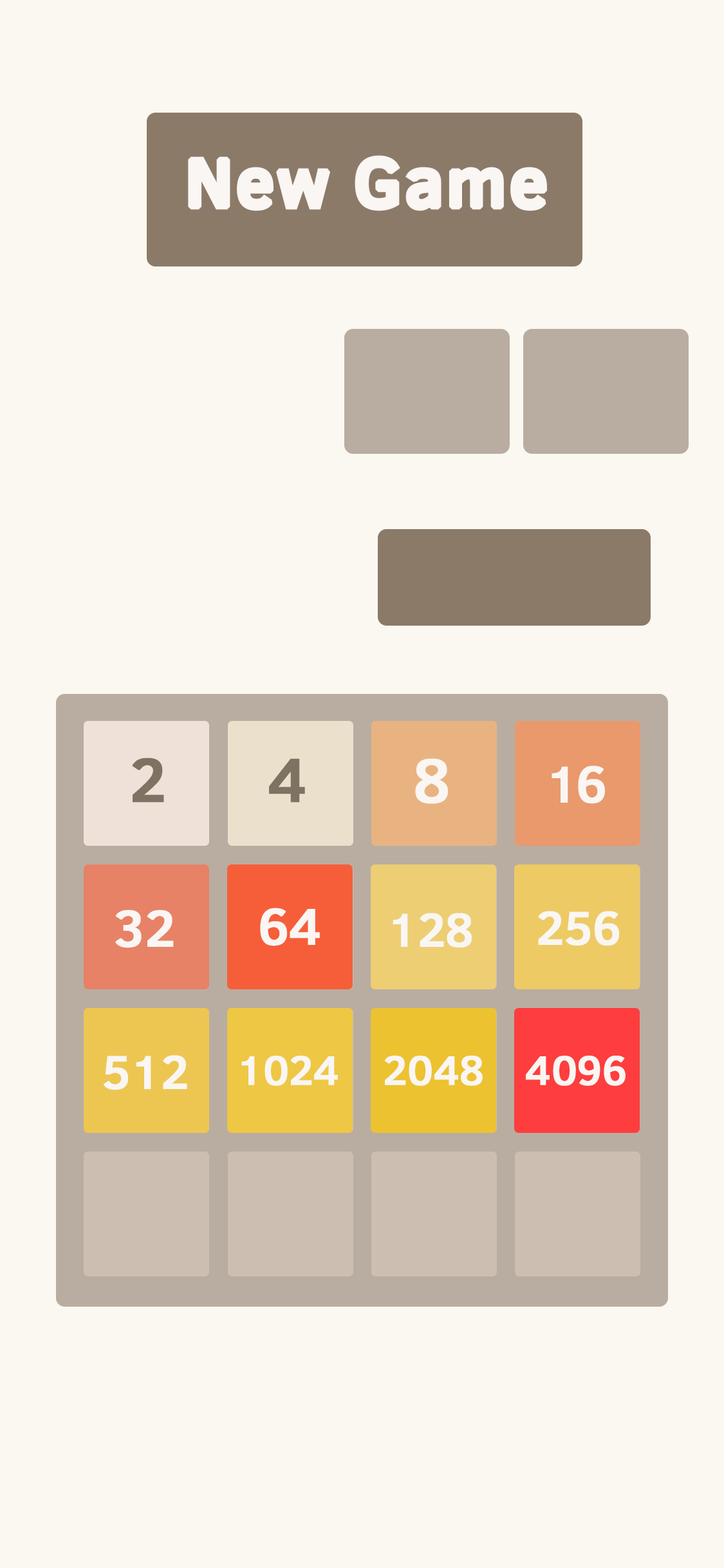
<style>
.page{position:relative;width:724px;height:1568px;background:#faf8f0}
.page>*{position:absolute;margin:0}
.t1{font:69.5px "ClearSans-Medium";letter-spacing:0.025em;color:#f9f6f3;font-weight:bold}
.t2{font:63px "ClearSans-Medium";letter-spacing:0.1em;color:#7e7262;font-weight:bold}
.t3{font:63px "ClearSans-Medium";letter-spacing:0.1em;color:#f9f6f3;font-weight:bold}
.t4{font:52.5px "ClearSans-Medium";letter-spacing:-0.075em;color:#f9f6f3;font-weight:bold}
.t5{font:52.5px "ClearSans-Medium";letter-spacing:-0.025em;color:#f9f6f3;font-weight:bold}
.t6{font:48.1px "ClearSans-Medium";letter-spacing:-0.025em;color:#f9f6f3;font-weight:bold}
.t7{font:42px "ClearSans-Medium";letter-spacing:-0.025em;color:#f9f6f3;font-weight:bold}
</style>
<div class="page">
<p class="t1" style="left:188px;top:155px;width:359px;height:56px">New Game</p>
<p class="t2" style="left:132px;top:758px;width:32px;height:45px">2</p>
<p class="t2" style="left:269px;top:758px;width:36px;height:45px">4</p>
<p class="t3" style="left:415px;top:758px;width:33px;height:46px">8</p>
<p class="t4" style="left:552px;top:765px;width:53px;height:39px">16</p>
<p class="t5" style="left:115px;top:910px;width:59px;height:38px">32</p>
<p class="t5" style="left:260px;top:908px;width:60px;height:38px">64</p>
<p class="t6" style="left:393px;top:913px;width:79px;height:34px">128</p>
<p class="t6" style="left:538px;top:911px;width:81px;height:35px">256</p>
<p class="t6" style="left:104px;top:1055px;width:83px;height:35px">512</p>
<p class="t7" style="left:241px;top:1056px;width:97px;height:30px">1024</p>
<p class="t7" style="left:384px;top:1056px;width:99px;height:30px">2048</p>
<p class="t7" style="left:526px;top:1056px;width:100px;height:30px">4096</p>
</div>
